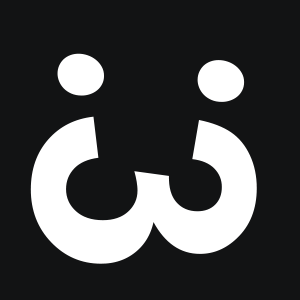
<style>
.page{position:relative;width:300px;height:300px;background:#121314}
.page>*{position:absolute;margin:0}
.t1{font:531.2px "Gabriola";color:#ffffff}
.t2{font:309px "Arial-BoldMT";color:#ffffff}
</style>
<div class="page">
<p class="t1" style="left:57px;top:53px;width:188px;height:49px;rotate:-90deg">:</p>
<p class="t2" style="left:30px;top:116px;width:227px;height:148px;rotate:90deg">3</p>
</div>
